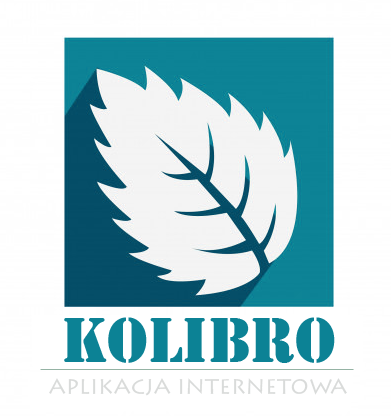
<style>
.page{position:relative;width:391px;height:416px;background:#ffffff}
.page>*{position:absolute;margin:0}
.t1{font:65.8px "Stencil";color:#0c8295}
.t2{font:21.3px "LithosPro-Regular";color:#d9dbda}
</style>
<div class="page">
<p class="t1" style="left:64px;top:317px;width:271px;height:46px">Kolibro</p>
<p class="t2" style="left:49px;top:378px;width:298px;height:18px">APLIKACJA INTERNETOWA</p>
</div>
